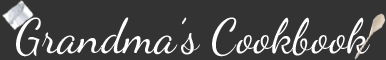
<style>
.page{position:relative;width:386px;height:60px;background:#333333}
.page>*{position:absolute;margin:0}
.t1{font:48px "DancingScript-Regular";color:#ffffff}
</style>
<div class="page">
<p class="t1" style="left:16px;top:17px;width:354px;height:40px">Grandma’s Cookbook</p>
</div>
